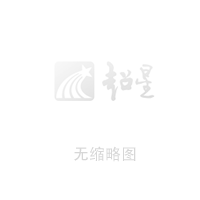
<style>
.page{position:relative;width:200px;height:200px;background:#ffffff}
.page>*{position:absolute;margin:0}
.t1{font:16px "AdobeHeitiStd-Regular";color:#d7d7d7}
</style>
<div class="page">
<p class="t1" style="left:74px;top:146px;width:62px;height:16px">无缩略图</p>
</div>
